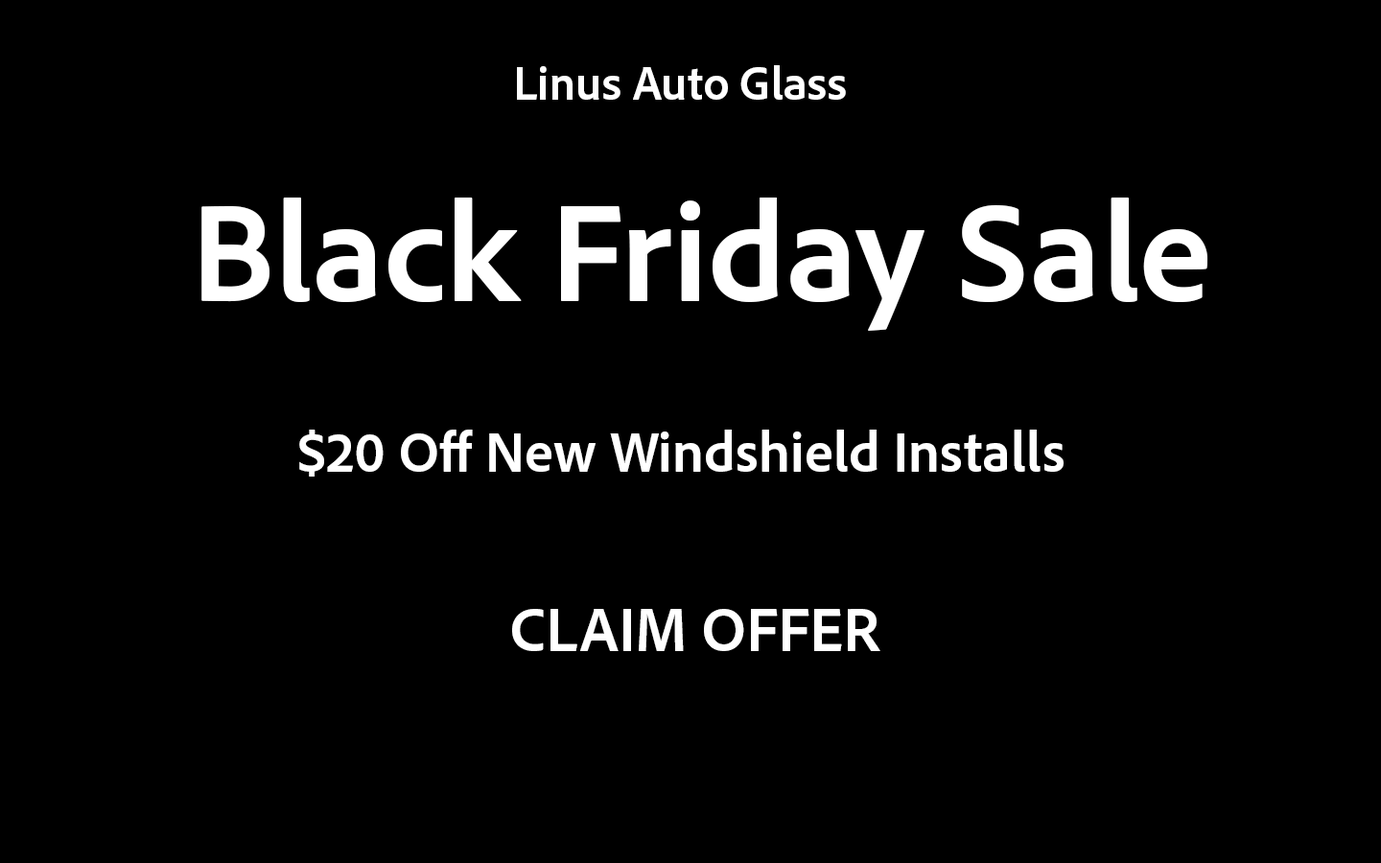
<style>
.page{position:relative;width:1381px;height:863px;background:#000000}
.page>*{position:absolute;margin:0}
.t1{font:48px "AdobeClean-Bold";color:#ffffff}
.t2{font:143.9px "AdobeClean-Bold";color:#ffffff}
.t3{font:57.6px "AdobeClean-Bold";color:#ffffff}
.t4{font:58.5px "AdobeClean-Bold";color:#ffffff}
</style>
<div class="page">
<p class="t1" style="left:517px;top:65px;width:329px;height:35px">Linus Auto Glass</p>
<p class="t2" style="left:201px;top:198px;width:1007px;height:133px">Black Friday Sale</p>
<p class="t3" style="left:299px;top:430px;width:765px;height:47px">$20 Off New Windshield Installs</p>
<p class="t4" style="left:512px;top:609px;width:369px;height:42px">CLAIM OFFER</p>
</div>
